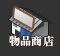
<style>
.page{position:relative;width:60px;height:56px;background:#333333}
.page>*{position:absolute;margin:0}
.t1{font:11px "RyuminPr6N-ExBold";letter-spacing:0.025em;color:#fff6f2}
</style>
<div class="page">
<p class="t1" style="left:9px;top:35px;width:45px;height:12px">物品商店</p>
</div>
